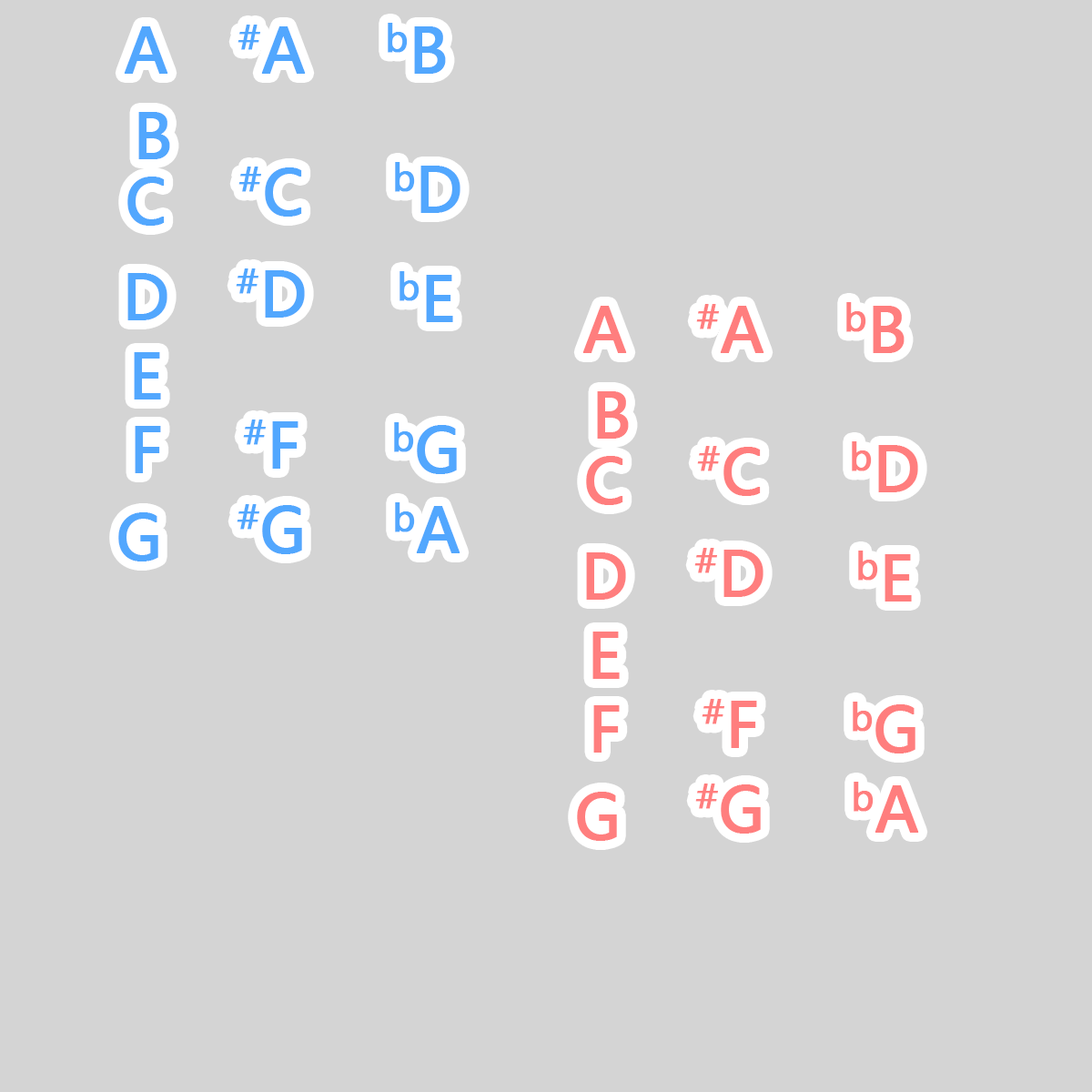
<style>
.page{position:relative;width:1092px;height:1092px;background:#d4d4d4}
.page>*{position:absolute;margin:0}
.t1{font:60.7px "MicrosoftYaHei";color:#52a7fe;font-weight:bold}
.t2{font:60.7px "MicrosoftYaHei";color:#ff7e7e;font-weight:bold}
</style>
<div class="page">
<p class="t1" style="left:124px;top:26px;width:44px;height:48px">A</p>
<p class="t1" style="left:238px;top:25px;width:68px;height:49px">#A</p>
<p class="t1" style="left:388px;top:23px;width:58px;height:51px">bB</p>
<p class="t1" style="left:138px;top:112px;width:32px;height:47px">B</p>
<p class="t1" style="left:395px;top:162px;width:65px;height:51px">bD</p>
<p class="t1" style="left:238px;top:167px;width:64px;height:50px">#C</p>
<p class="t1" style="left:127px;top:177px;width:38px;height:49px">C</p>
<p class="t1" style="left:236px;top:268px;width:69px;height:50px">#D</p>
<p class="t1" style="left:127px;top:273px;width:40px;height:47px">D</p>
<p class="t1" style="left:399px;top:271px;width:54px;height:51px">bE</p>
<p class="t2" style="left:582px;top:306px;width:45px;height:47px">A</p>
<p class="t2" style="left:696px;top:304px;width:68px;height:49px">#A</p>
<p class="t2" style="left:846px;top:302px;width:59px;height:51px">bB</p>
<p class="t1" style="left:134px;top:352px;width:27px;height:47px">E</p>
<p class="t2" style="left:597px;top:391px;width:32px;height:48px">B</p>
<p class="t1" style="left:135px;top:426px;width:26px;height:47px">F</p>
<p class="t1" style="left:243px;top:420px;width:55px;height:49px">#F</p>
<p class="t1" style="left:394px;top:422px;width:63px;height:52px">bG</p>
<p class="t2" style="left:697px;top:446px;width:64px;height:50px">#C</p>
<p class="t2" style="left:852px;top:441px;width:66px;height:51px">bD</p>
<p class="t2" style="left:586px;top:456px;width:37px;height:49px">C</p>
<p class="t1" style="left:237px;top:504px;width:65px;height:50px">#G</p>
<p class="t1" style="left:395px;top:502px;width:65px;height:51px">bA</p>
<p class="t1" style="left:118px;top:512px;width:40px;height:49px">G</p>
<p class="t2" style="left:586px;top:552px;width:40px;height:48px">D</p>
<p class="t2" style="left:694px;top:548px;width:69px;height:49px">#D</p>
<p class="t2" style="left:858px;top:551px;width:54px;height:51px">bE</p>
<p class="t2" style="left:592px;top:632px;width:28px;height:47px">E</p>
<p class="t2" style="left:702px;top:699px;width:55px;height:49px">#F</p>
<p class="t2" style="left:853px;top:702px;width:62px;height:51px">bG</p>
<p class="t2" style="left:593px;top:705px;width:27px;height:48px">F</p>
<p class="t2" style="left:695px;top:783px;width:66px;height:51px">#G</p>
<p class="t2" style="left:854px;top:782px;width:65px;height:51px">bA</p>
<p class="t2" style="left:577px;top:792px;width:40px;height:49px">G</p>
</div>
